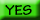
<style>
.page{position:relative;width:40px;height:20px}
.page>*{position:absolute;margin:0}
.t1{font:15px "TektonPro-Bold";color:#000000}
</style>
<div class="page">
<p class="t1" style="left:5px;top:5px;width:27px;height:10px">YES</p>
</div>
